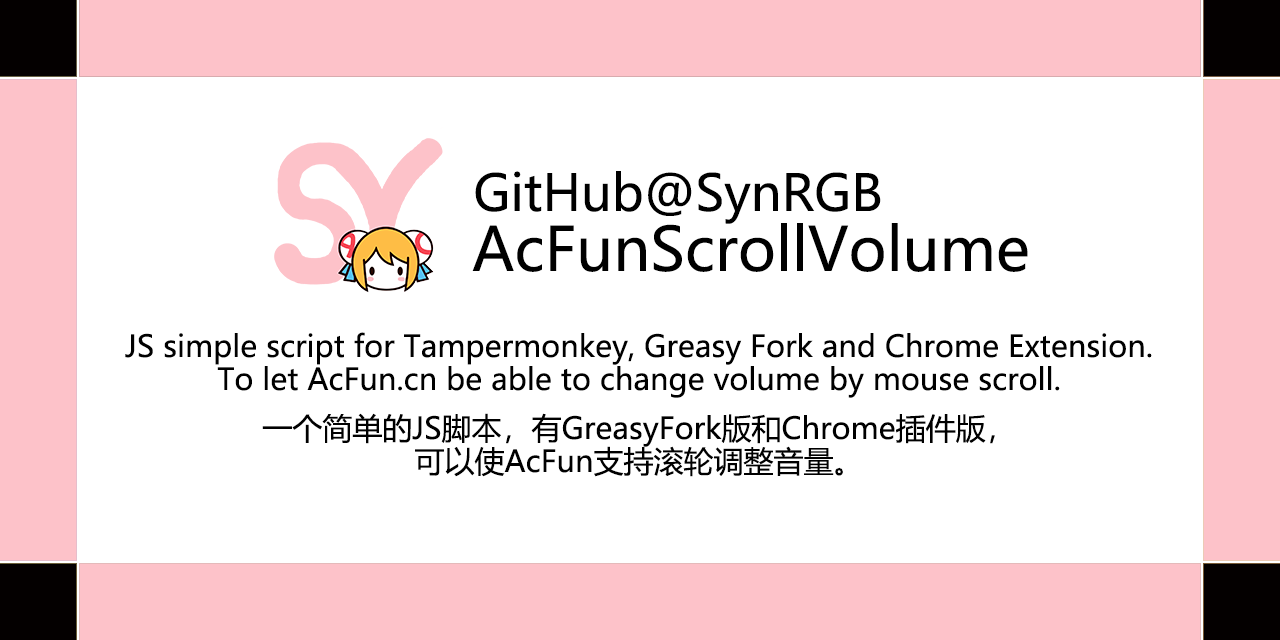
<style>
.page{position:relative;width:1280px;height:640px;background:#ffffff}
.page>*{position:absolute;margin:0}
.t1{font:50px "MicrosoftYaHei";color:#000000}
.t2{font:60px "MicrosoftYaHei";color:#000000}
.t3{font:30px/33px "MicrosoftYaHei";color:#000000}
.t4{font:30px/16px "MicrosoftYaHei";color:#000000}
</style>
<div class="page">
<p class="t1" style="left:475px;top:171px;width:406px;height:53px">GitHub@SynRGB</p>
<p class="t2" style="left:472px;top:223px;width:556px;height:49px">AcFunScrollVolume</p>
<p class="t3" style="left:125px;top:332px;width:1027px;height:145px;text-align:center">JS simple script for Tampermonkey, Greasy Fork and Chrome Extension.<br>To let AcFun.cn be able to cha<span class="t4">nge volume by mouse scroll.<br> <br>一个简单的JS脚本，有GreasyFork版和C</span>hrome插件版，<br>可以使AcFun支持滚轮调整音量。</p>
</div>
